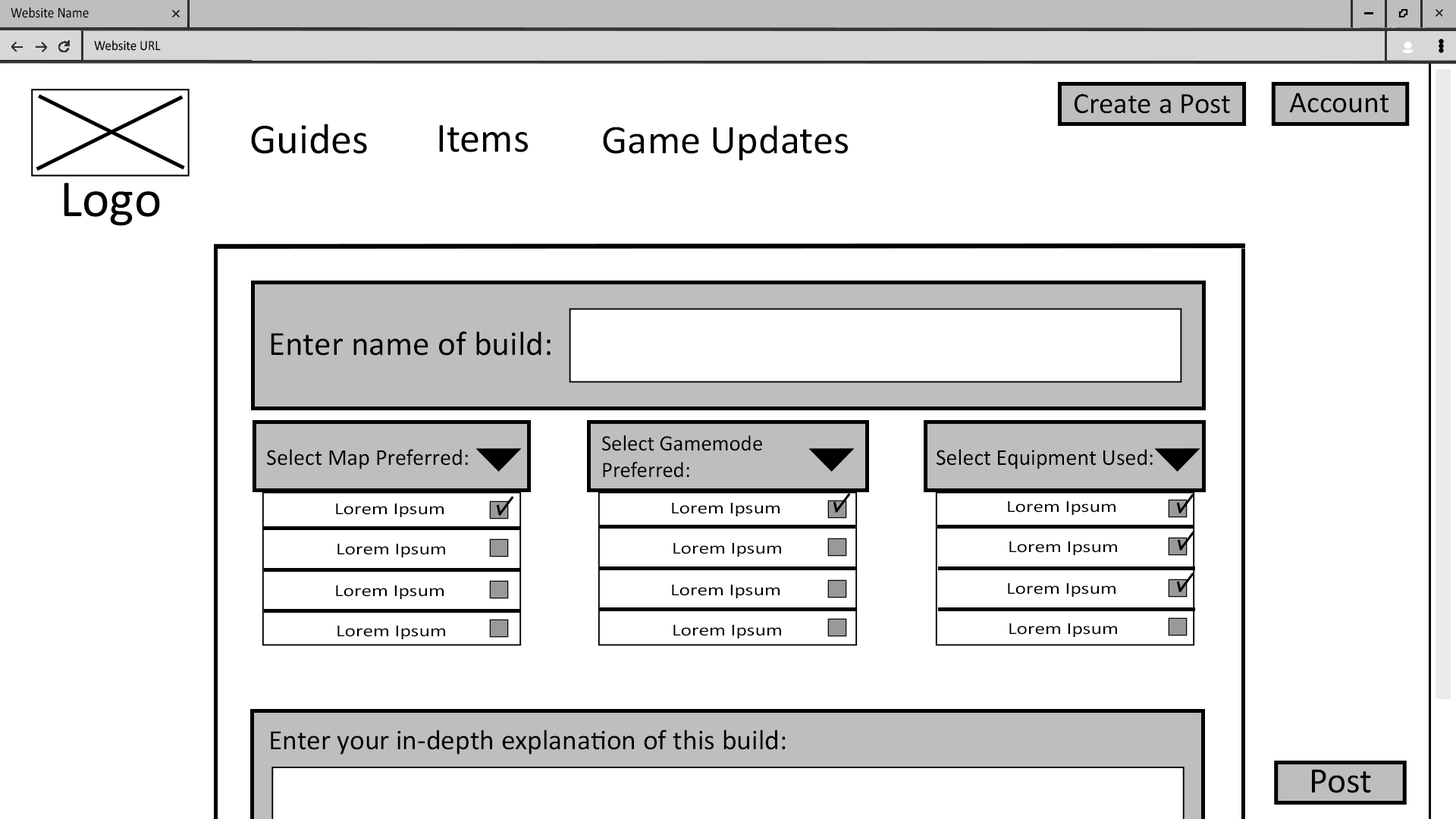
<style>
.page{position:relative;width:1456px;height:819px;background:#ffffff}
.page>*{position:absolute;margin:0}
.t1{font:14.8px "Calibri";color:#000000;scale:0.89 1}
.t2{font:14.1px "Calibri";color:#000000;scale:0.91 1}
.t3{font:29.6px "Calibri";color:#000000}
.t4{font:30.2px "Calibri";color:#000000}
.t5{font:43px "Calibri";color:#000000}
.t6{font:41.7px "Calibri";color:#000000}
.t7{font:41px "Calibri";color:#000000}
.t8{font:34.3px "Calibri";color:#000000}
.t9{font:22.2px "Calibri";color:#000000}
.t10{font:22.8px "Calibri";color:#000000}
.t11{font:16.8px "Calibri";color:#000000;scale:1.24 1}
.t12{font:28.2px "Calibri";color:#000000}
.t13{font:36.3px "Calibri";color:#000000}
</style>
<div class="page">
<p class="t1" style="left:11px;top:7px;width:78px;height:11px">Website Name</p>
<p class="t2" style="left:94px;top:40px;width:67px;height:11px">Website URL</p>
<p class="t3" style="left:1074px;top:94px;width:156px;height:20px">Create a Post</p>
<p class="t4" style="left:1289px;top:93px;width:99px;height:20px">Account</p>
<p class="t5" style="left:251px;top:124px;width:116px;height:30px">Guides</p>
<p class="t6" style="left:439px;top:125px;width:89px;height:27px">Items</p>
<p class="t7" style="left:603px;top:125px;width:245px;height:36px">Game Updates</p>
<p class="t8" style="left:271px;top:331px;width:280px;height:25px">Enter name of build:</p>
<p class="t9" style="left:602px;top:435px;width:160px;height:43px">Select Gamemode <br>Preferred:</p>
<p class="t10" style="left:267px;top:449px;width:201px;height:20px">Select Map Preferred:</p>
<p class="t10" style="left:937px;top:449px;width:216px;height:20px">Select Equipment Used:</p>
<p class="t11" style="left:336px;top:504px;width:108px;height:13px">Lorem Ipsum</p>
<p class="t11" style="left:672px;top:503px;width:108px;height:13px">Lorem Ipsum</p>
<p class="t11" style="left:1008px;top:501px;width:107px;height:14px">Lorem Ipsum</p>
<p class="t11" style="left:337px;top:544px;width:108px;height:13px">Lorem Ipsum</p>
<p class="t11" style="left:673px;top:543px;width:108px;height:14px">Lorem Ipsum</p>
<p class="t11" style="left:1009px;top:541px;width:108px;height:14px">Lorem Ipsum</p>
<p class="t11" style="left:336px;top:585px;width:108px;height:14px">Lorem Ipsum</p>
<p class="t11" style="left:672px;top:585px;width:108px;height:13px">Lorem Ipsum</p>
<p class="t11" style="left:1008px;top:583px;width:107px;height:14px">Lorem Ipsum</p>
<p class="t11" style="left:337px;top:626px;width:108px;height:13px">Lorem Ipsum</p>
<p class="t11" style="left:673px;top:625px;width:108px;height:14px">Lorem Ipsum</p>
<p class="t11" style="left:1009px;top:623px;width:108px;height:14px">Lorem Ipsum</p>
<p class="t12" style="left:271px;top:730px;width:515px;height:25px">Enter your in-depth explanation of this build:</p>
<p class="t13" style="left:1312px;top:769px;width:59px;height:24px">Post</p>
</div>
